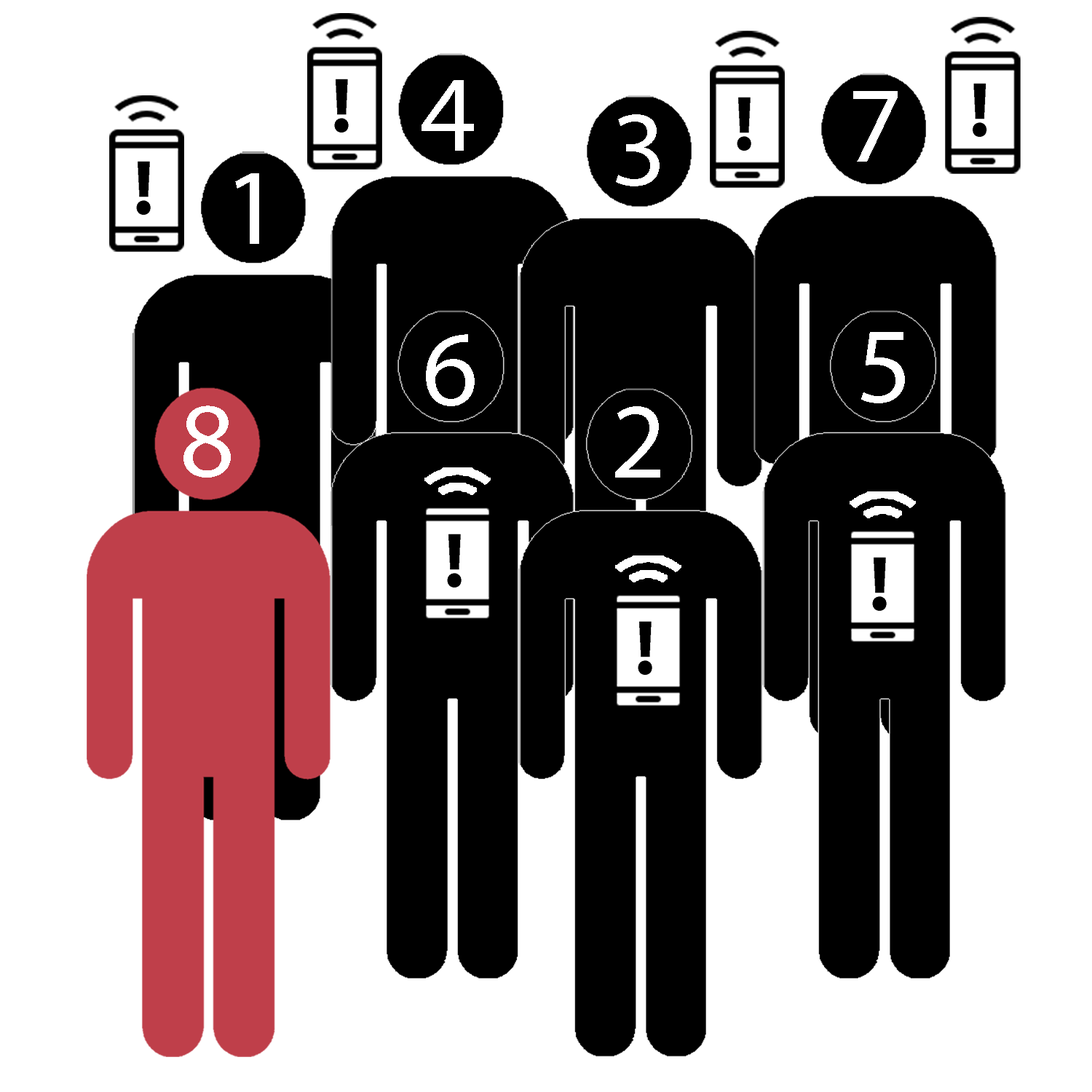
<style>
.page{position:relative;width:1092px;height:1092px;background:#ffffff}
.page>*{position:absolute;margin:0}
.t1{font:109.2px "MyriadPro-Regular";color:#ffffff}
</style>
<div class="page">
<p class="t1" style="left:422px;top:80px;width:52px;height:71px">4</p>
<p class="t1" style="left:853px;top:91px;width:45px;height:71px">7</p>
<p class="t1" style="left:616px;top:114px;width:44px;height:72px">3</p>
<p class="t1" style="left:235px;top:173px;width:24px;height:71px">1</p>
<p class="t1" style="left:426px;top:334px;width:49px;height:72px">6</p>
<p class="t1" style="left:861px;top:332px;width:44px;height:71px">5</p>
<p class="t1" style="left:183px;top:405px;width:48px;height:73px">8</p>
<p class="t1" style="left:615px;top:406px;width:45px;height:72px">2</p>
</div>
